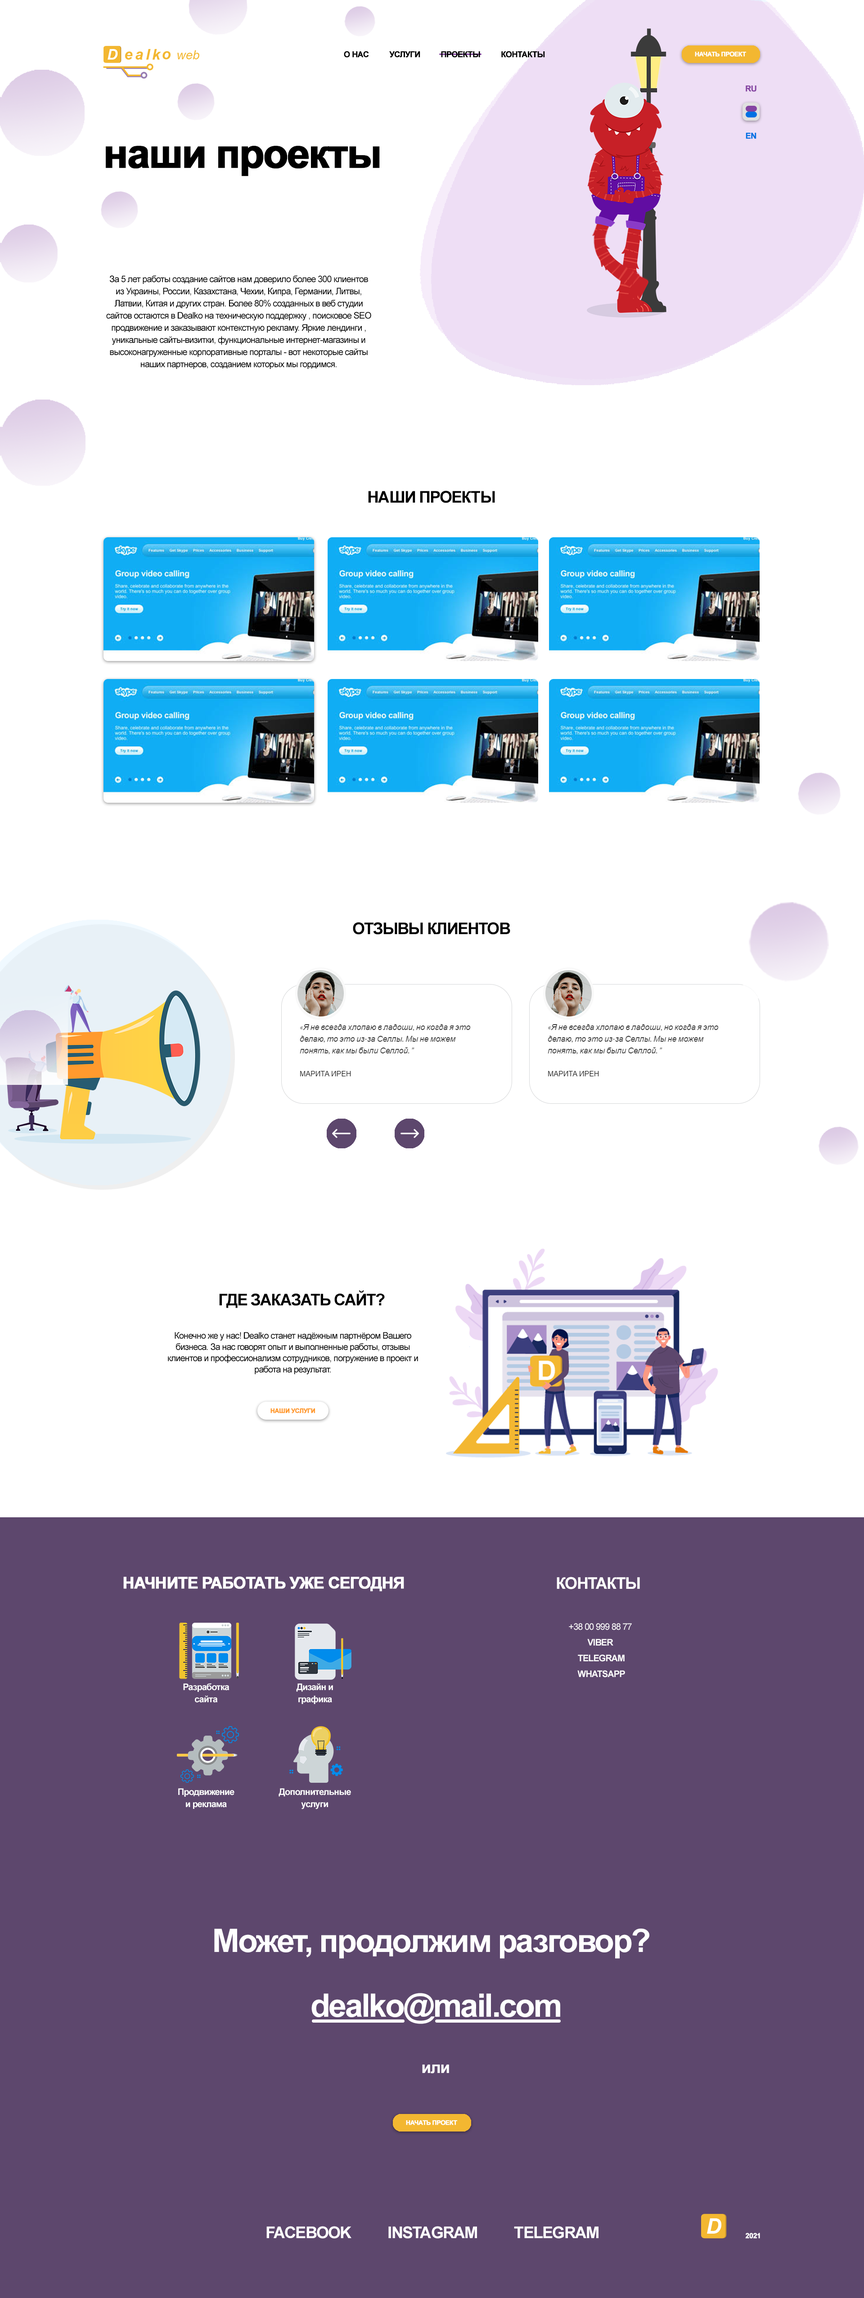
<style>
.page{position:relative;width:864px;height:2298px;background:#ffffff}
.page>*{position:absolute;margin:0}
.t1{font:8.1px "Arial-BoldMT";letter-spacing:-0.05em;color:#000000;font-weight:bold}
.t2{font:6.3px "Arial-BoldMT";letter-spacing:-0.05em;color:#ffffff;font-weight:bold}
.t3{font:8.1px "Arial-BoldMT";letter-spacing:-0.05em;color:#8544a2;font-weight:bold}
.t4{font:8.1px "Arial-BoldMT";letter-spacing:-0.05em;color:#0071e3;font-weight:bold}
.t5{font:40.5px "Arial-BoldMT";letter-spacing:-0.05em;color:#000000;font-weight:bold}
.t6{font:9px/12.2px "ArialMT";letter-spacing:-0.05em;color:#000000}
.t7{font:16.2px "Arial-BoldMT";letter-spacing:-0.05em;color:#000000}
.t8{font:9px/11.2px "ArialMT";letter-spacing:-0.05em;color:#000000}
.t9{font:6.3px "Arial-BoldMT";letter-spacing:-0.05em;color:#ff9a2e;font-weight:bold}
.t10{font:16.2px "Arial-BoldMT";letter-spacing:-0.05em;color:#ffffff;font-weight:bold}
.t11{font:16.2px "Arial-BoldMT";letter-spacing:-0.05em;color:#ffffff}
.t12{font:9px/15.8px "Arial-BoldMT";letter-spacing:-0.05em;color:#fefefe}
.t13{font:9px/15.8px "ArialMT";letter-spacing:-0.05em;color:#fefefe}
.t14{font:9px/12.2px "Arial-BoldMT";letter-spacing:-0.05em;color:#ffffff}
.t15{font:32.4px "Arial-BoldMT";letter-spacing:-0.05em;color:#fefefe}
.t16{font:16.2px "Arial-BoldMT";letter-spacing:-0.05em;color:#fefefe}
.t17{font:7.2px "Arial-BoldMT";letter-spacing:-0.05em;color:#ffffff;font-weight:bold}
</style>
<div class="page">
<p class="t1" style="left:344px;top:51px;width:201px;height:7px">О НАС          УСЛУГИ          ПРОЕКТЫ          КОНТАКТЫ</p>
<p class="t2" style="left:695px;top:51px;width:51px;height:6px">НАЧАТЬ ПРОЕКТ</p>
<p class="t3" style="left:746px;top:86px;width:10px;height:6px">RU</p>
<p class="t4" style="left:746px;top:133px;width:10px;height:6px">EN</p>
<p class="t5" style="left:106px;top:146px;width:274px;height:30px">наши проекты</p>
<p class="t6" style="left:106px;top:275px;width:265px;height:94px;text-align:center">За 5 лет работы создание сайтов нам доверило более 300 клиентов из Украины, России, Казахстана, Чехии, Кипра, Германии, Литвы, Латвии, Китая и других стран. Более 80% созданных в веб студии сайтов остаются в Dealko на техническую поддержку , поисковое SEO продвижение и заказывают контекстную рекламу. Яркие лендинги , уникальные сайты-визитки, функциональные интернет-магазины и высоконагруженные корпоративные порталы - вот некоторые сайты наших партнеров, созданием которых мы гордимся.</p>
<p class="t7" style="left:368px;top:490px;width:127px;height:13px">НАШИ ПРОЕКТЫ</p>
<p class="t7" style="left:353px;top:922px;width:157px;height:13px">ОТЗЫВЫ КЛИЕНТОВ</p>
<p class="t7" style="left:219px;top:1290px;width:166px;height:18px">ГДЕ ЗАКАЗАТЬ САЙТ?</p>
<p class="t8" style="left:168px;top:1332px;width:250px;height:43px;text-align:center">Конечно же у нас! Dealko станет надёжным партнёром Вашего бизнеса. За нас говорят опыт и выполненные работы, отзывы клиентов и профессионализм сотрудников, погружение в проект и работа на результат.</p>
<p class="t9" style="left:270px;top:1408px;width:45px;height:5px">НАШИ УСЛУГИ</p>
<p class="t10" style="left:123px;top:1576px;width:281px;height:16px">НАЧНИТЕ РАБОТАТЬ УЖЕ СЕГОДНЯ</p>
<p class="t11" style="left:557px;top:1577px;width:83px;height:12px">КОНТАКТЫ</p>
<p class="t12" style="left:569px;top:1623px;width:63px;height:55px;text-align:center"><span class="t13">+38 00 999 88 77 <br></span>VIBER <br>TELEGRAM<br>WHATSAPP</p>
<p class="t14" style="left:183px;top:1683px;width:47px;height:20px;text-align:center">Разработка<br>сайта</p>
<p class="t14" style="left:296px;top:1683px;width:37px;height:21px;text-align:center">Дизайн и<br>графика</p>
<p class="t14" style="left:178px;top:1788px;width:56px;height:21px;text-align:center">Продвижение<br>и реклама</p>
<p class="t14" style="left:279px;top:1788px;width:72px;height:21px;text-align:center">Дополнительные<br>услуги</p>
<p class="t15" style="left:214px;top:1929px;width:435px;height:30px">Может, продолжим разговор?</p>
<p class="t15" style="left:311px;top:1993px;width:249px;height:31px">dealko@mail.com</p>
<p class="t16" style="left:422px;top:2065px;width:27px;height:9px">или</p>
<p class="t2" style="left:406px;top:2120px;width:51px;height:5px">НАЧАТЬ ПРОЕКТ</p>
<p class="t16" style="left:266px;top:2226px;width:332px;height:13px">FACEBOOK          INSTAGRAM          TELEGRAM</p>
<p class="t17" style="left:745px;top:2233px;width:15px;height:6px">2021</p>
</div>
